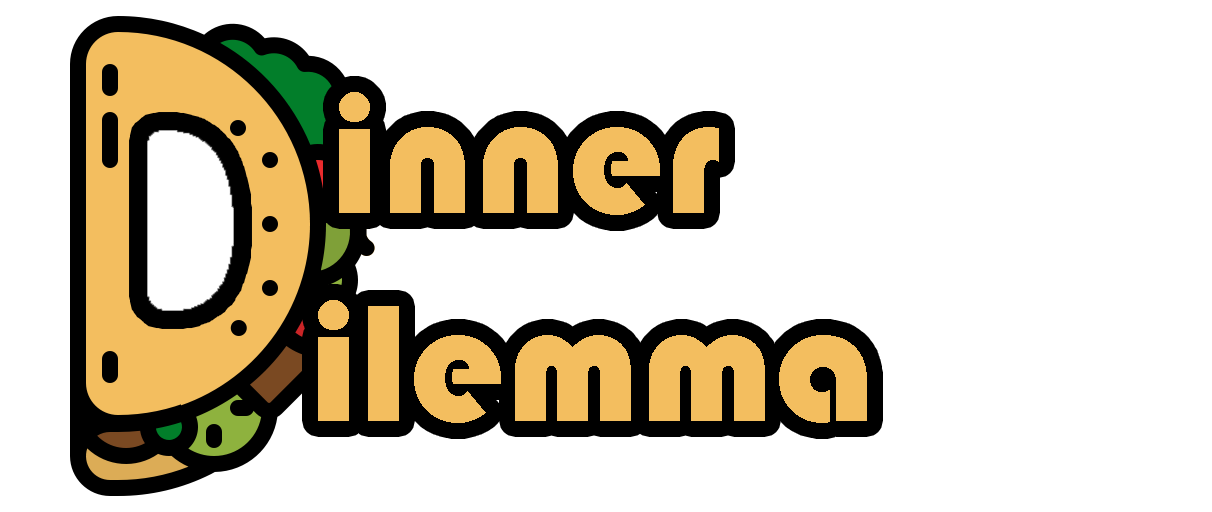
<style>
.page{position:relative;width:1212px;height:512px;background:#ffffff}
.page>*{position:absolute;margin:0}
.t1{font:173.4px "Bauhaus93";color:#f3be5f}
.t2{font:53.3px "Ravie";color:#f3be5f}
</style>
<div class="page">
<p class="t1" style="left:318px;top:92px;width:549px;height:331px"><span class="t2"> </span>inner<br>ilemma</p>
</div>
